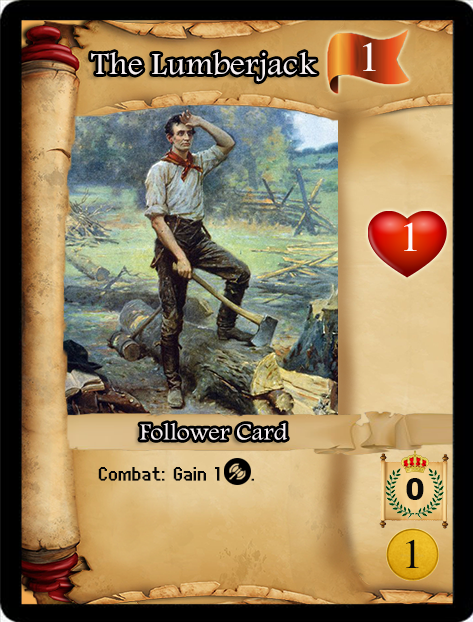
<style>
.page{position:relative;width:473px;height:622px}
.page>*{position:absolute;margin:0}
.t1{font:32px "Andalus";color:#f6eff0;scale:1.06 1}
.t2{font:40px "SimplifiedArabic";color:#fef9f9;scale:1.05 1}
.t3{font:24px "Andalus";color:#f6eff0;scale:1.06 1}
.t4{font:24px "UNDA-BitmapFine";letter-spacing:0.01em;color:#060606;font-weight:bold}
.t5{font:32px "Swiss721BT-Heavy";color:#090909}
.t6{font:40px "SimplifiedArabic";color:#090909;scale:1.05 1}
</style>
<div class="page">
<p class="t1" style="left:91px;top:52px;width:226px;height:30px">The Lumberjack</p>
<p class="t2" style="left:363px;top:42px;width:13px;height:29px">1</p>
<p class="t2" style="left:404px;top:222px;width:13px;height:29px">1</p>
<p class="t3" style="left:140px;top:423px;width:147px;height:17px">Follower Card</p>
<p class="t4" style="left:98px;top:467px;width:156px;height:14px">Combat: Gain 1    .</p>
<p class="t5" style="left:406px;top:478px;width:18px;height:22px">0</p>
<p class="t6" style="left:406px;top:539px;width:13px;height:29px">1</p>
</div>
